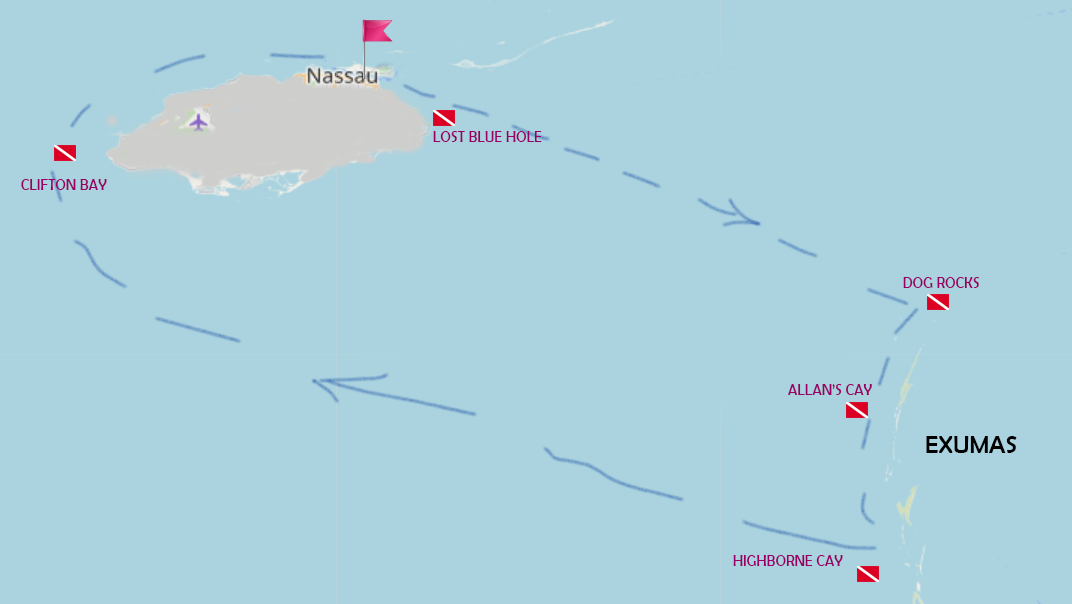
<style>
.page{position:relative;width:1072px;height:604px;background:#aad3df}
.page>*{position:absolute;margin:0}
.t1{font:16.3px "BerlinSansFB-Reg";color:#990066;scale:0.88 1}
.t2{font:25px "BerlinSansFB-Reg";color:#000000}
</style>
<div class="page">
<p class="t1" style="left:433px;top:131px;width:109px;height:11px">LOST BLUE HOLE</p>
<p class="t1" style="left:21px;top:179px;width:86px;height:11px">CLIFTON BAY</p>
<p class="t1" style="left:903px;top:277px;width:76px;height:11px">DOG ROCKS</p>
<p class="t1" style="left:788px;top:384px;width:84px;height:11px">ALLAN’S CAY</p>
<p class="t2" style="left:926px;top:436px;width:91px;height:17px">EXUMAS</p>
<p class="t1" style="left:733px;top:555px;width:110px;height:11px">HIGHBORNE CAY</p>
</div>
